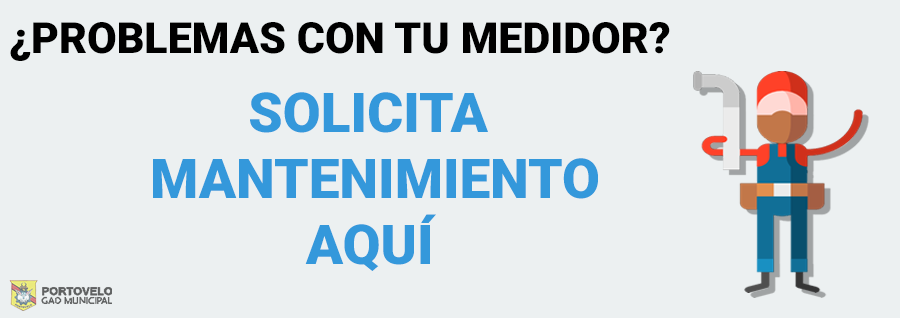
<style>
.page{position:relative;width:900px;height:318px;background:#ecf0f1}
.page>*{position:absolute;margin:0}
.t1{font:43px "Roboto-Black";color:#000000}
.t2{font:55px "Roboto-Black";color:#3498db}
</style>
<div class="page">
<p class="t1" style="left:10px;top:22px;width:660px;height:39px">¿PROBLEMAS CON TU MEDIDOR?</p>
<p class="t2" style="left:153px;top:92px;width:445px;height:179px;text-align:center">SOLICITA <br>MANTENIMIENTO<br>AQUÍ</p>
</div>
